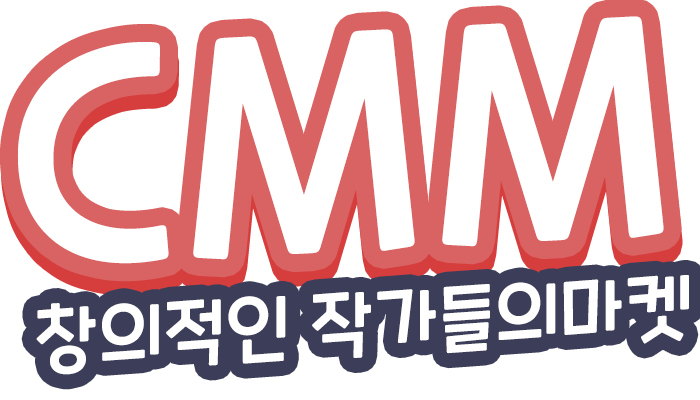
<style>
.page{position:relative;width:700px;height:400px;background:#ffffff}
.page>*{position:absolute;margin:0}
.t1{font:288.7px "CookieRunOTF-Regular";color:#ffffff}
.t2{font:72.2px "CookieRunOTF-Regular";color:#ffffff}
</style>
<div class="page">
<p class="t1" style="left:17px;top:16px;width:647px;height:248px;rotate:-3deg">CMM</p>
<p class="t1" style="left:19px;top:31px;width:646px;height:247px;rotate:-3deg">CMM</p>
<p class="t2" style="left:36px;top:275px;width:653px;height:100px;rotate:-3deg">창의적인 작가들의마켓</p>
</div>
